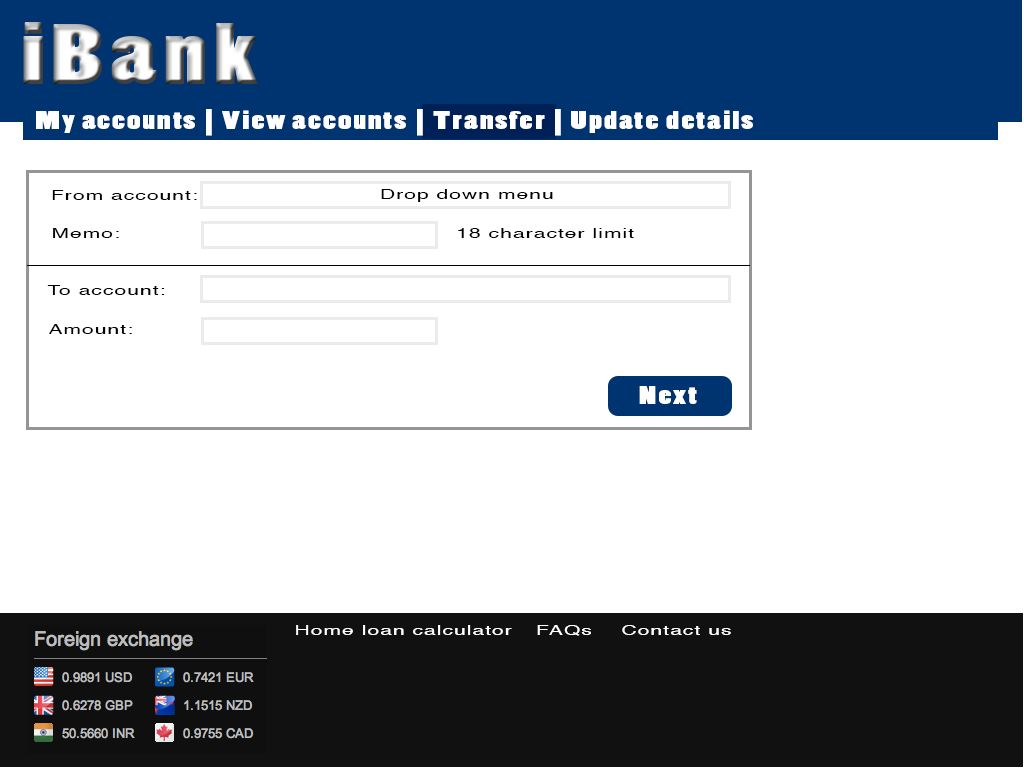
<style>
.page{position:relative;width:1024px;height:768px;background:#ffffff}
.page>*{position:absolute;margin:0}
.t1{font:24px "PoplarStd";letter-spacing:0.05em;color:#ffffff;scale:1.5 1}
.t2{font:14px "Helvetica";letter-spacing:0.05em;color:#000000;scale:1.5 1}
.t3{font:14px "Helvetica";letter-spacing:0.05em;color:#ffffff;scale:1.5 1}
</style>
<div class="page">
<p class="t1" style="left:36px;top:109px;width:717px;height:27px">My accounts | View accounts | Transfer | Update details</p>
<p class="t2" style="left:52px;top:190px;width:145px;height:10px">From account:</p>
<p class="t2" style="left:381px;top:189px;width:172px;height:13px">Drop down menu</p>
<p class="t2" style="left:53px;top:228px;width:66px;height:10px">Memo:</p>
<p class="t2" style="left:458px;top:228px;width:176px;height:10px">18 character limit</p>
<p class="t2" style="left:47px;top:285px;width:118px;height:10px">To account:</p>
<p class="t2" style="left:49px;top:324px;width:83px;height:10px">Amount:</p>
<p class="t1" style="left:639px;top:386px;width:58px;height:18px">Next</p>
<p class="t3" style="left:296px;top:625px;width:216px;height:10px">Home loan calculator</p>
<p class="t3" style="left:537px;top:625px;width:54px;height:11px">FAQs</p>
<p class="t3" style="left:622px;top:625px;width:109px;height:10px">Contact us</p>
</div>
